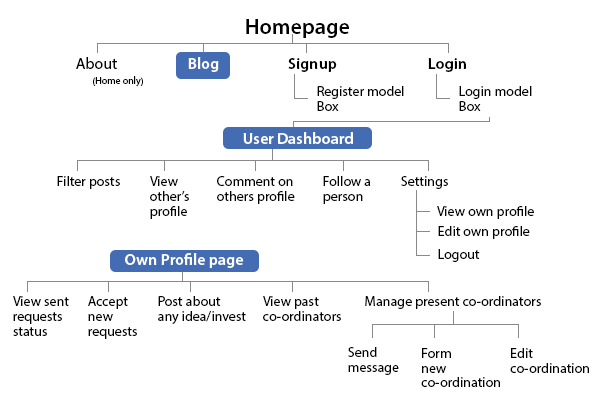
<style>
.page{position:relative;width:595px;height:420px;background:#ffffff}
.page>*{position:absolute;margin:0}
.t1{font:22px "MyriadPro-Semibold";color:#000000}
.t2{font:16px "MyriadPro-Regular";color:#000000}
.t3{font:16px "MyriadPro-Semibold";color:#ffffff}
.t4{font:16px "MyriadPro-Semibold";color:#000000}
.t5{font:10px "MyriadPro-Regular";color:#000000}
.t6{font:14px/14.8px "MyriadPro-Regular";color:#000000}
.t7{font:14px "MyriadPro-Regular";color:#000000}
</style>
<div class="page">
<p class="t1" style="left:246px;top:19px;width:103px;height:19px">Homepage</p>
<p class="t2" style="left:76px;top:57px;width:41px;height:12px">About</p>
<p class="t3" style="left:188px;top:57px;width:31px;height:15px">Blog</p>
<p class="t4" style="left:288px;top:58px;width:49px;height:14px">Signup</p>
<p class="t4" style="left:428px;top:58px;width:38px;height:14px">Login</p>
<p class="t5" style="left:93px;top:76px;width:50px;height:11px">(Home only)</p>
<p class="t6" style="left:317px;top:86px;width:87px;height:25px">Register model<br>Box</p>
<p class="t6" style="left:459px;top:86px;width:73px;height:25px">Login model<br>Box</p>
<p class="t3" style="left:243px;top:132px;width:110px;height:12px">User Dashboard</p>
<p class="t7" style="left:57px;top:176px;width:63px;height:13px">Filter posts</p>
<p class="t6" style="left:150px;top:176px;width:39px;height:43px">View <br>other’s <br>profile</p>
<p class="t6" style="left:217px;top:176px;width:78px;height:28px">Comment on<br>others profile</p>
<p class="t6" style="left:323px;top:176px;width:48px;height:28px">Follow a<br>person</p>
<p class="t7" style="left:401px;top:176px;width:47px;height:13px">Settings</p>
<p class="t7" style="left:437px;top:206px;width:97px;height:13px">View own profile</p>
<p class="t7" style="left:438px;top:226px;width:92px;height:13px">Edit own profile</p>
<p class="t3" style="left:125px;top:253px;width:119px;height:15px">Own Profile page</p>
<p class="t7" style="left:438px;top:249px;width:42px;height:13px">Logout</p>
<p class="t6" style="left:13px;top:296px;width:56px;height:40px">View sent<br>requests<br>status</p>
<p class="t6" style="left:88px;top:296px;width:49px;height:43px">Accept <br>new <br>requests</p>
<p class="t6" style="left:158px;top:296px;width:88px;height:28px">Post about<br>any idea/invest</p>
<p class="t6" style="left:263px;top:296px;width:78px;height:25px">View past<br>co-ordinators</p>
<p class="t7" style="left:365px;top:296px;width:176px;height:13px">Manage present co-ordinators</p>
<p class="t6" style="left:348px;top:347px;width:51px;height:28px">Send <br>message</p>
<p class="t6" style="left:421px;top:348px;width:79px;height:39px">Form<br>new<br>co-ordination</p>
<p class="t6" style="left:510px;top:348px;width:79px;height:25px">Edit<br>co-ordination</p>
</div>
